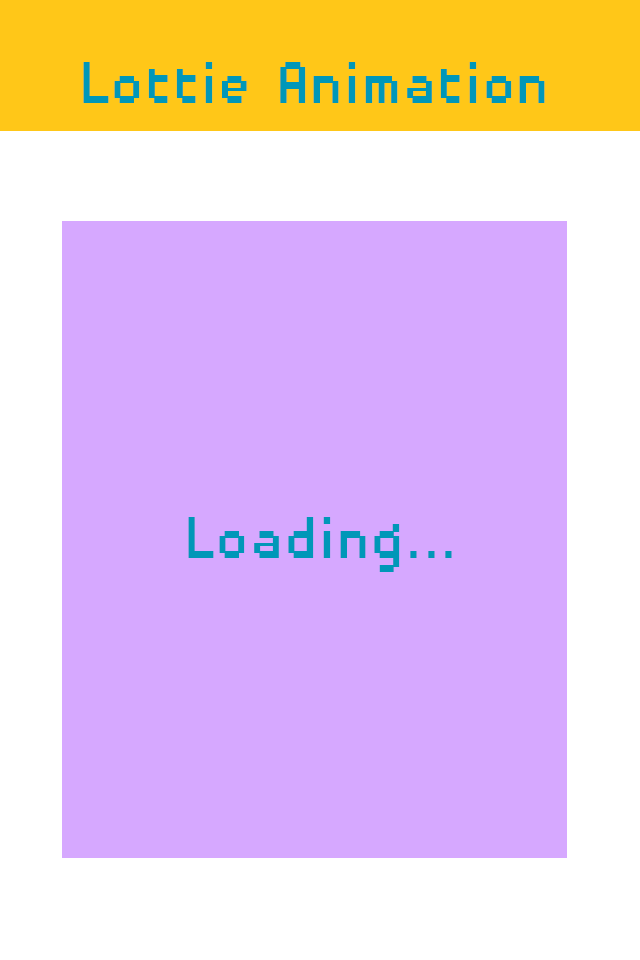
<style>
.page{position:relative;width:640px;height:960px;background:#d6a8ff}
.page>*{position:absolute;margin:0}
.t1{font:76.6px "DisposableDroidBB";color:#0097b8;scale:0.91 1}
</style>
<div class="page">
<p class="t1" style="left:83px;top:62px;width:462px;height:41px">Lottie Animation</p>
</div>
